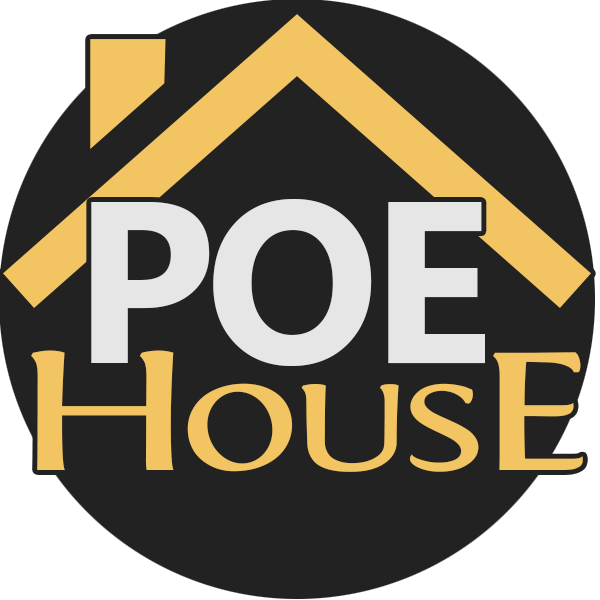
<style>
.page{position:relative;width:600px;height:600px;background:#222222}
.page>*{position:absolute;margin:0}
.t1{font:230px "SegoeUI-Bold";letter-spacing:-0.04em;color:#e6e6e6}
.t2{font:127.8px "Fontin-SmallCaps";letter-spacing:-0.08em;color:#f2c462;scale:1.41 1}
.t3{font:177.5px "Fontin-SmallCaps";letter-spacing:-0.08em;color:#f2c462;scale:1.41 1}
.t4{font:177.5px "Fontin-SmallCaps";letter-spacing:-0.16em;color:#f2c462;scale:1.41 1}
</style>
<div class="page">
<p class="t1" style="left:91px;top:199px;width:394px;height:167px">POE</p>
<p class="t2" style="left:31px;top:350px;width:552px;height:122px"><span class="t3">H</span>OUS<span class="t4">E</span></p>
</div>
